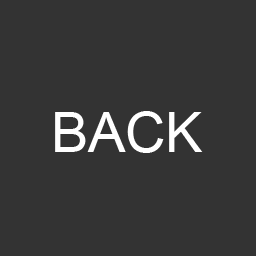
<style>
.page{position:relative;width:256px;height:256px;background:#333333}
.page>*{position:absolute;margin:0}
.t1{font:55.8px "ArialMT";color:#ffffff}
</style>
<div class="page">
<p class="t1" style="left:55px;top:111px;width:148px;height:42px">BACK</p>
</div>
